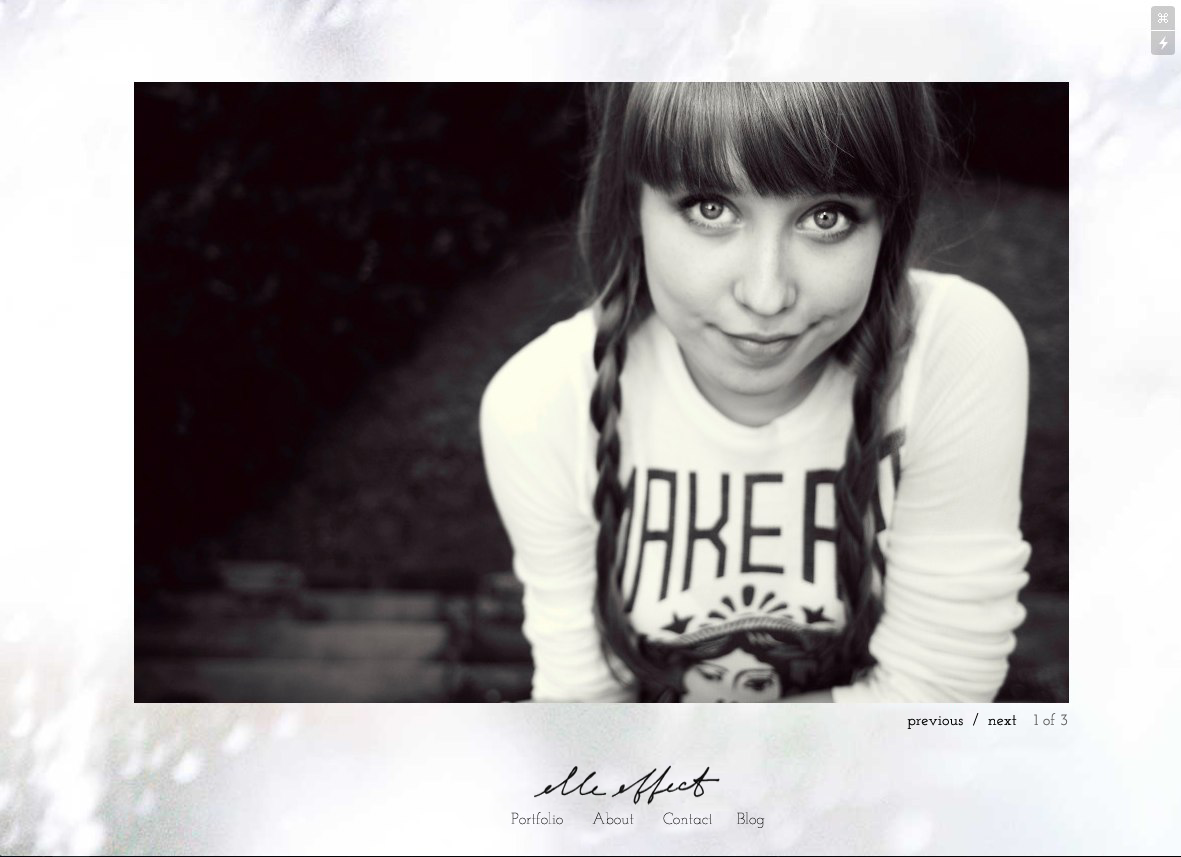
<style>
.page{position:relative;width:1181px;height:857px}
.page>*{position:absolute;margin:0}
.t1{font:16px "JosefinSlab";color:#000000}
.t2{font:16px "JosefinSlab";color:#616161}
.t3{font:16px "JosefinSlab-Thin"}
</style>
<div class="page">
<p class="t1" style="left:907px;top:713px;width:110px;height:16px">previous  /  next</p>
<p class="t2" style="left:1034px;top:713px;width:34px;height:13px">1 of 3</p>
<p class="t3" style="left:511px;top:812px;width:254px;height:16px">Portfolio      About      Contact     Blog</p>
</div>
